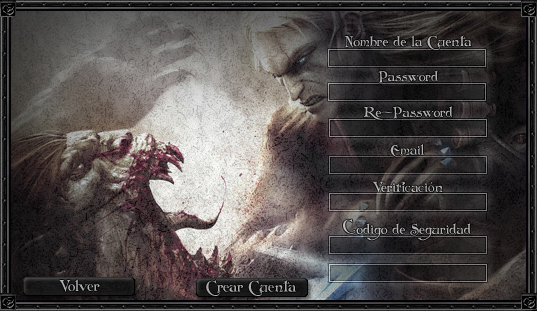
<style>
.page{position:relative;width:537px;height:311px}
.page>*{position:absolute;margin:0}
.t1{font:14px "Folkard";color:#b2b1b1}
.t2{font:14px "Folkard";color:#b0afaf}
.t3{font:14px "Folkard";color:#aeaeae}
.t4{font:14px "Folkard";color:#b3b2b2}
.t5{font:14px "TimesNewRomanPSMT";color:#b3b2b2}
.t6{font:14px "Folkard";color:#bfbebd}
.t7{font:15px "Folkard";color:#adadad}
</style>
<div class="page">
<p class="t1" style="left:344px;top:35px;width:128px;height:15px">Nombre de la Cuenta</p>
<p class="t2" style="left:378px;top:70px;width:60px;height:13px">Password</p>
<p class="t3" style="left:363px;top:106px;width:90px;height:14px">Re-Password</p>
<p class="t1" style="left:390px;top:144px;width:34px;height:13px">Email</p>
<p class="t4" style="left:373px;top:181px;width:70px;height:12px">Verificaci<span class="t5">ó</span>n</p>
<p class="t6" style="left:343px;top:219px;width:13px;height:15px">C</p>
<p class="t4" style="left:356px;top:223px;width:115px;height:18px">odigo de Seguridad</p>
<p class="t7" style="left:59px;top:279px;width:41px;height:13px">Volver</p>
<p class="t7" style="left:206px;top:279px;width:90px;height:17px">Crear Cuenta</p>
</div>
